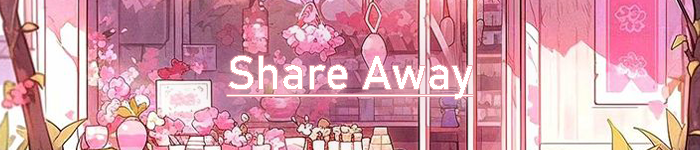
<style>
.page{position:relative;width:700px;height:150px}
.page>*{position:absolute;margin:0}
.t1{font:46.2px "Bahnschrift";color:#ffffff;text-decoration:underline}
</style>
<div class="page">
<p class="t1" style="left:227px;top:56px;width:246px;height:43px">Share Away</p>
</div>
